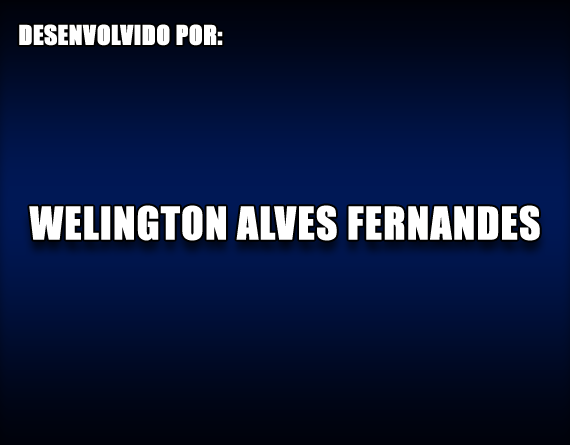
<style>
.page{position:relative;width:570px;height:445px}
.page>*{position:absolute;margin:0}
.t1{font:25px "Impact";color:#ffffff;font-weight:bold}
.t2{font:41.7px "Impact";color:#ffffff;font-weight:bold}
</style>
<div class="page">
<p class="t1" style="left:19px;top:24px;width:204px;height:22px">DESENVOLVIDO POR:</p>
<p class="t2" style="left:29px;top:205px;width:511px;height:36px">WELINGTON ALVES FERNANDES</p>
</div>
